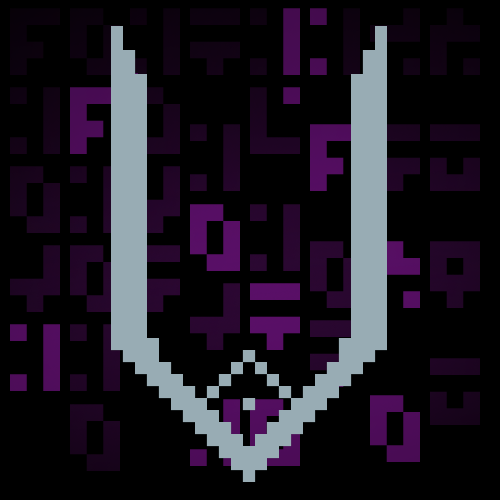
<style>
.page{position:relative;width:500px;height:500px;background:#000000}
.page>*{position:absolute;margin:0}
.t1{font:120px "Drifter";color:#98acb4}
</style>
<div class="page">
<p class="t1" style="left:111px;top:26px;width:276px;height:456px">V</p>
</div>
